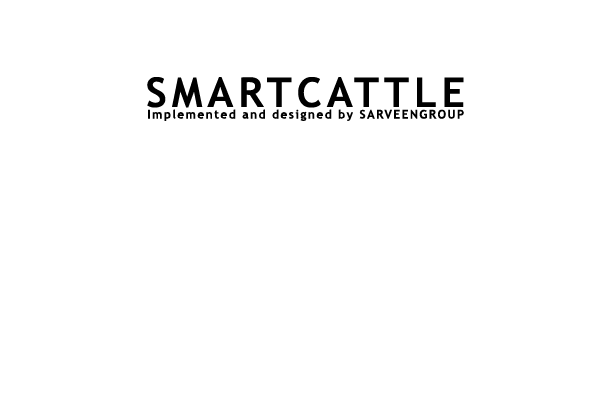
<style>
.page{position:relative;width:598px;height:404px;background:#ffffff}
.page>*{position:absolute;margin:0}
.t1{font:41.1px "TrebuchetMS-Bold";letter-spacing:0.12em;color:#000000}
.t2{font:12px "TrebuchetMS-Bold";letter-spacing:0.12em;color:#000000}
</style>
<div class="page">
<p class="t1" style="left:147px;top:77px;width:317px;height:31px">SMARTCATTLE</p>
<p class="t2" style="left:148px;top:109px;width:316px;height:12px">Implemented and designed by SARVEENGROUP</p>
</div>
